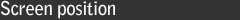
<style>
.page{position:relative;width:240px;height:20px;background:#333333}
.page>*{position:absolute;margin:0}
.t1{font:19px "BellGothicStd-Bold";letter-spacing:-0.025em;color:#ffffff}
</style>
<div class="page">
<p class="t1" style="left:0px;top:0px;width:115px;height:19px">Screen position</p>
</div>
